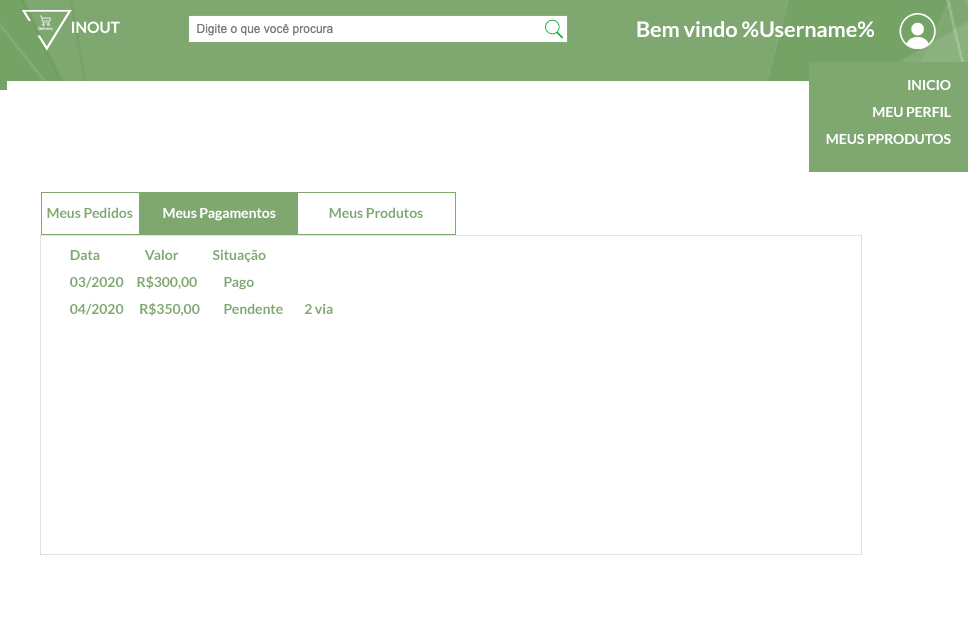
<style>
.page{position:relative;width:968px;height:619px;background:#ffffff}
.page>*{position:absolute;margin:0}
.t1{font:21.7px "Lato-Bold";letter-spacing:-0.005em;color:#ffffff}
.t2{font:14px/27px "Lato-Bold";letter-spacing:-0.005em;color:#ffffff}
.t3{font:14px "Lato-Bold";letter-spacing:-0.005em;color:#7ea86f}
.t4{font:14px "Lato-Bold";letter-spacing:-0.005em;color:#ffffff}
.t5{font:14px/27px "Lato-Bold";letter-spacing:-0.005em;color:#7ea86f}
</style>
<div class="page">
<p class="t1" style="left:637px;top:21px;width:237px;height:16px">Bem vindo %Username%</p>
<p class="t2" style="left:826px;top:80px;width:125px;height:64px;text-align:right">INICIO <br>MEU PERFIL<br>MEUS PPRODUTOS</p>
<p class="t3" style="left:47px;top:207px;width:86px;height:11px">Meus Pedidos</p>
<p class="t4" style="left:163px;top:208px;width:113px;height:13px">Meus Pagamentos</p>
<p class="t3" style="left:329px;top:207px;width:94px;height:11px">Meus Produtos</p>
<p class="t5" style="left:70px;top:249px;width:263px;height:67px">Data                 Valor             Situação<br>03/2020     R$300,00          Pago <br>04/2020      R$350,00         Pendente        2 via</p>
</div>
